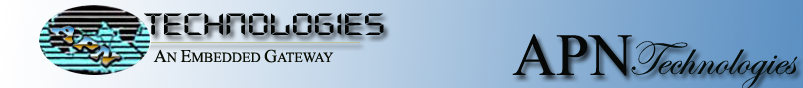
<style>
.page{position:relative;width:803px;height:88px}
.page>*{position:absolute;margin:0}
.t1{font:30px "DigifaceWide";color:#040606}
.t2{font:60px "TimesNewRomanPSMT";color:#050807}
.t3{font:48px "EdwardianScriptITC";color:#050e0c}
.t4{font:14px "TimesNewRomanPSMT";color:#050807}
.t5{font:18px "TimesNewRomanPSMT";color:#050807}
</style>
<div class="page">
<p class="t1" style="left:144px;top:13px;width:240px;height:22px">Technologies</p>
<p class="t2" style="left:512px;top:34px;width:120px;height:42px">APN</p>
<p class="t3" style="left:631px;top:41px;width:167px;height:49px">Technologies</p>
<p class="t4" style="left:153px;top:49px;width:181px;height:14px"><span class="t5">    A</span>N <span class="t5">E</span>MBEDDED <span class="t5">G</span>ATEWAY</p>
</div>
